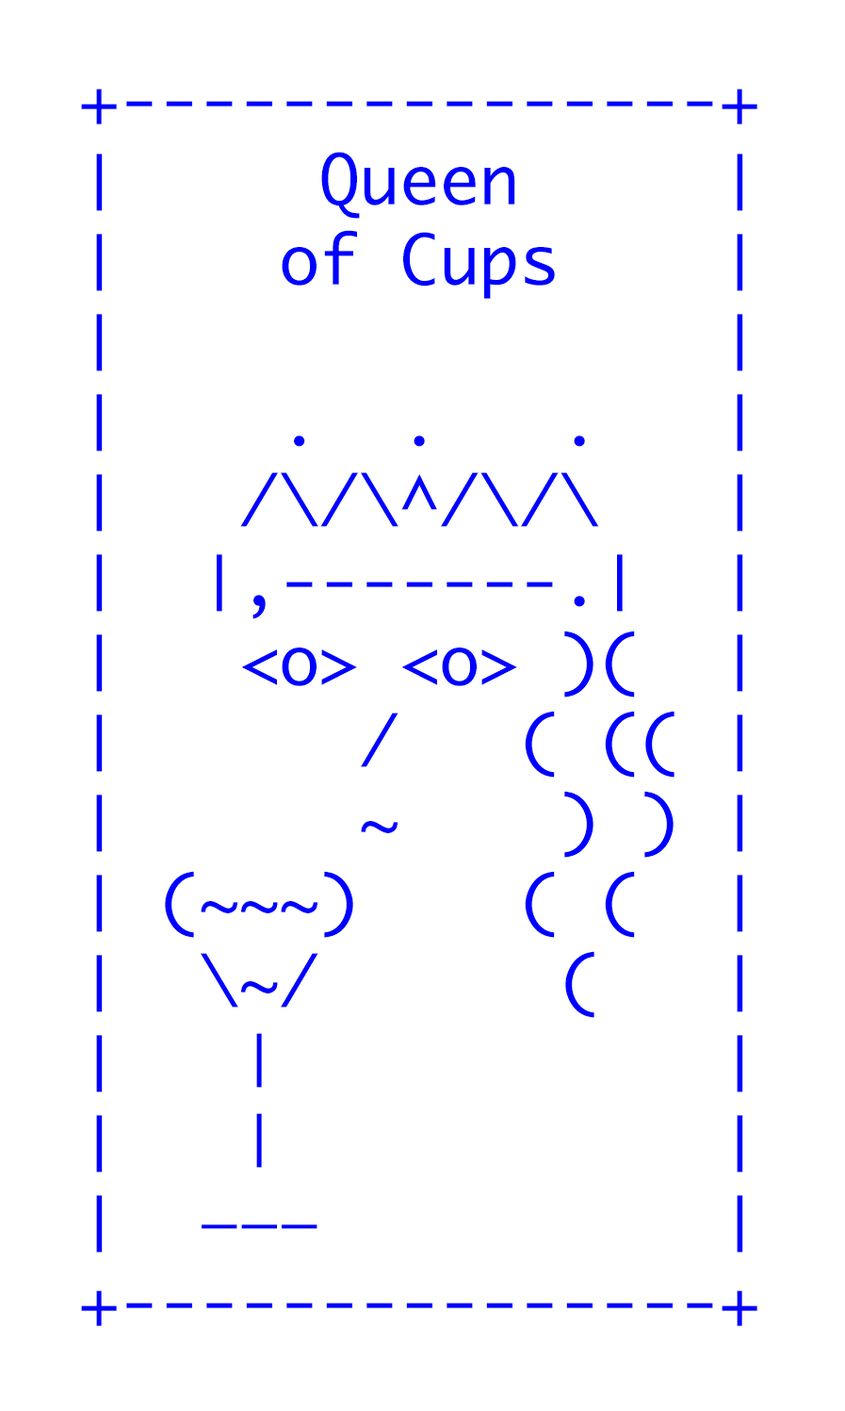
<style>
.page{position:relative;width:845px;height:1411px;background:#ffffff}
.page>*{position:absolute;margin:0}
.t1{font:66.7px "Monaco";color:#0000ff}
</style>
<div class="page">
<p class="t1" style="left:81px;top:89px;width:677px;height:1237px">+---------------+<br>│     Queen     │<br>│    of Cups    │<br>│               │<br>│    .  .   .   │<br>│   /\/\^/\/\   │<br>│  │,-------.│  │<br>│   &lt;o&gt; &lt;o&gt; )(  │ <br>│      /   ( (( │ <br>│      ~    ) ) │<br>│ (~~~)    ( (  │ <br>│  \~/      (   │<br>│   |           │<br>│   |           │<br>│  ———          │<br>+---------------+</p>
</div>
